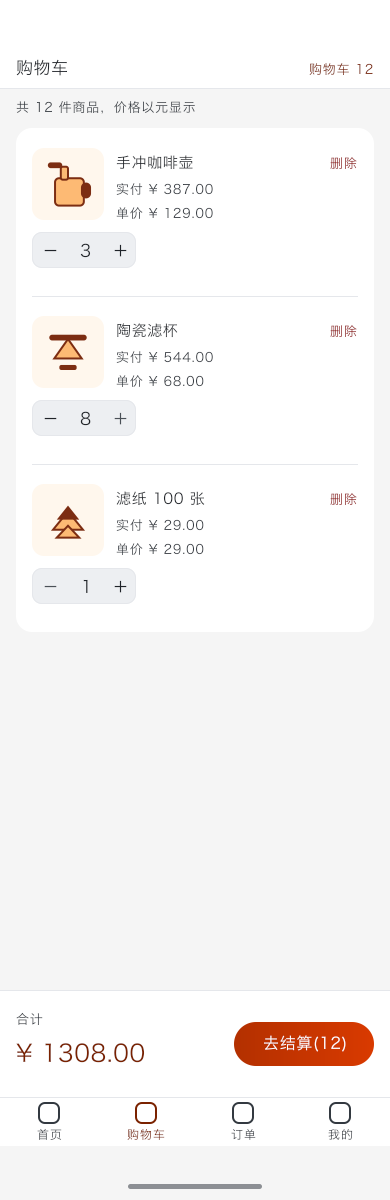
<style>
.page{position:relative;width:390px;height:1200px;background:#ffffff}
.page>*{position:absolute;margin:0}
.t1{font:17px "HiraginoSansGB-Regular";letter-spacing:0.03em;color:#282c31}
.t2{font:13px "HiraginoSansGB-Regular";letter-spacing:0.06em;color:#86402a}
.t3{font:13px "HiraginoSansGB-Regular";letter-spacing:0.06em;color:#333940}
.t4{font:15px "HiraginoSansGB-Regular";letter-spacing:0.04em;color:#282b31}
.t5{font:13px "HiraginoSansGB-Regular";letter-spacing:0.06em}
.t6{font:13px "HiraginoSansGB-Regular";letter-spacing:0.06em;color:#3d4349}
.t7{font:13px "HiraginoSansGB-Regular";letter-spacing:0.06em;color:#42474d}
.t8{font:17px "HiraginoSansGB-Regular";letter-spacing:0.03em;color:#1f2329}
.t9{font:15px "HiraginoSansGB-Regular";letter-spacing:0.04em;color:#23272c}
.t10{font:13px "HiraginoSansGB-Regular";letter-spacing:0.06em;color:#43484e}
.t11{font:13px "HiraginoSansGB-Regular";letter-spacing:0.06em;color:#3b4147}
.t12{font:17px "HiraginoSansGB-Regular";letter-spacing:0.03em;color:#4a5057}
.t13{font:15px "HiraginoSansGB-Regular";letter-spacing:0.04em;color:#282c31}
.t14{font:13px "HiraginoSansGB-Regular";letter-spacing:0.06em;color:#3f454b}
.t15{font:16px "HiraginoSansGB-Regular";letter-spacing:0.04em;color:#ffffff}
.t16{font:24px "HiraginoSansGB-Regular";letter-spacing:0.022em;color:#7a2200}
.t17{font:12px "HiraginoSansGB-Regular";letter-spacing:0.08em}
.t18{font:12px "HiraginoSansGB-Regular";letter-spacing:0.08em;color:#82361c}
</style>
<div class="page">
<p class="t1" style="left:15px;top:59px;width:53px;height:18px">购物车</p>
<p class="t2" style="left:308px;top:63px;width:66px;height:14px">购物车 12</p>
<p class="t3" style="left:15px;top:101px;width:181px;height:14px">共 12 件商品，价格以元显示</p>
<p class="t4" style="left:115px;top:155px;width:79px;height:15px">手冲咖啡壶</p>
<p class="t5" style="left:329px;top:157px;width:29px;height:13px">删除</p>
<p class="t6" style="left:115px;top:183px;width:99px;height:13px">实付 ¥ 387.00</p>
<p class="t7" style="left:115px;top:207px;width:99px;height:13px">单价 ¥ 129.00</p>
<p class="t8" style="left:79px;top:243px;width:13px;height:16px">3</p>
<p class="t8" style="left:114px;top:244px;width:13px;height:13px">＋</p>
<p class="t8" style="left:44px;top:249px;width:13px;height:3px">－</p>
<p class="t9" style="left:116px;top:323px;width:63px;height:16px">陶瓷滤杯</p>
<p class="t5" style="left:329px;top:325px;width:29px;height:13px">删除</p>
<p class="t10" style="left:115px;top:351px;width:99px;height:13px">实付 ¥ 544.00</p>
<p class="t11" style="left:115px;top:375px;width:90px;height:13px">单价 ¥ 68.00</p>
<p class="t8" style="left:79px;top:411px;width:13px;height:16px">8</p>
<p class="t12" style="left:114px;top:412px;width:13px;height:13px">＋</p>
<p class="t8" style="left:44px;top:417px;width:13px;height:3px">－</p>
<p class="t13" style="left:115px;top:491px;width:91px;height:16px">滤纸 100 张</p>
<p class="t5" style="left:329px;top:493px;width:29px;height:13px">删除</p>
<p class="t14" style="left:115px;top:519px;width:90px;height:13px">实付 ¥ 29.00</p>
<p class="t14" style="left:115px;top:543px;width:90px;height:13px">单价 ¥ 29.00</p>
<p class="t8" style="left:82px;top:579px;width:7px;height:15px">1</p>
<p class="t8" style="left:114px;top:580px;width:13px;height:13px">＋</p>
<p class="t12" style="left:44px;top:585px;width:13px;height:3px">－</p>
<p class="t5" style="left:15px;top:1012px;width:29px;height:14px">合计</p>
<p class="t15" style="left:263px;top:1035px;width:84px;height:18px">去结算(12)</p>
<p class="t16" style="left:15px;top:1043px;width:131px;height:21px">¥ 1308.00</p>
<p class="t17" style="left:36px;top:1128px;width:27px;height:13px">首页</p>
<p class="t18" style="left:126px;top:1128px;width:40px;height:13px">购物车</p>
<p class="t17" style="left:230px;top:1129px;width:27px;height:12px">订单</p>
<p class="t17" style="left:327px;top:1129px;width:27px;height:12px">我的</p>
</div>
